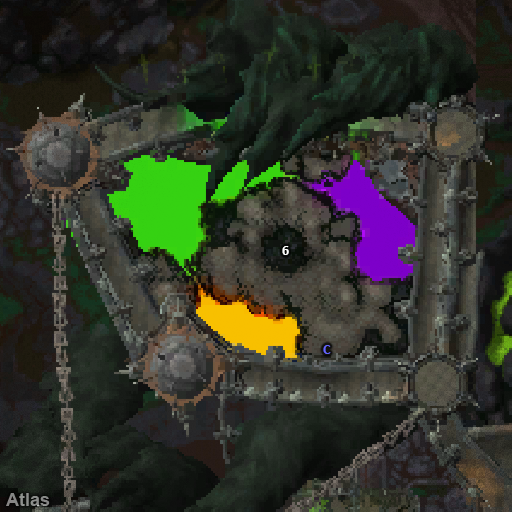
<style>
.page{position:relative;width:512px;height:512px}
.page>*{position:absolute;margin:0}
.t1{font:14px "Calibri-Bold";color:#ffffff}
.t2{font:14px "Calibri-Bold";color:#6666ff}
</style>
<div class="page">
<p class="t1" style="left:282px;top:246px;width:7px;height:9px">6</p>
<p class="t2" style="left:323px;top:345px;width:8px;height:9px">C</p>
</div>
